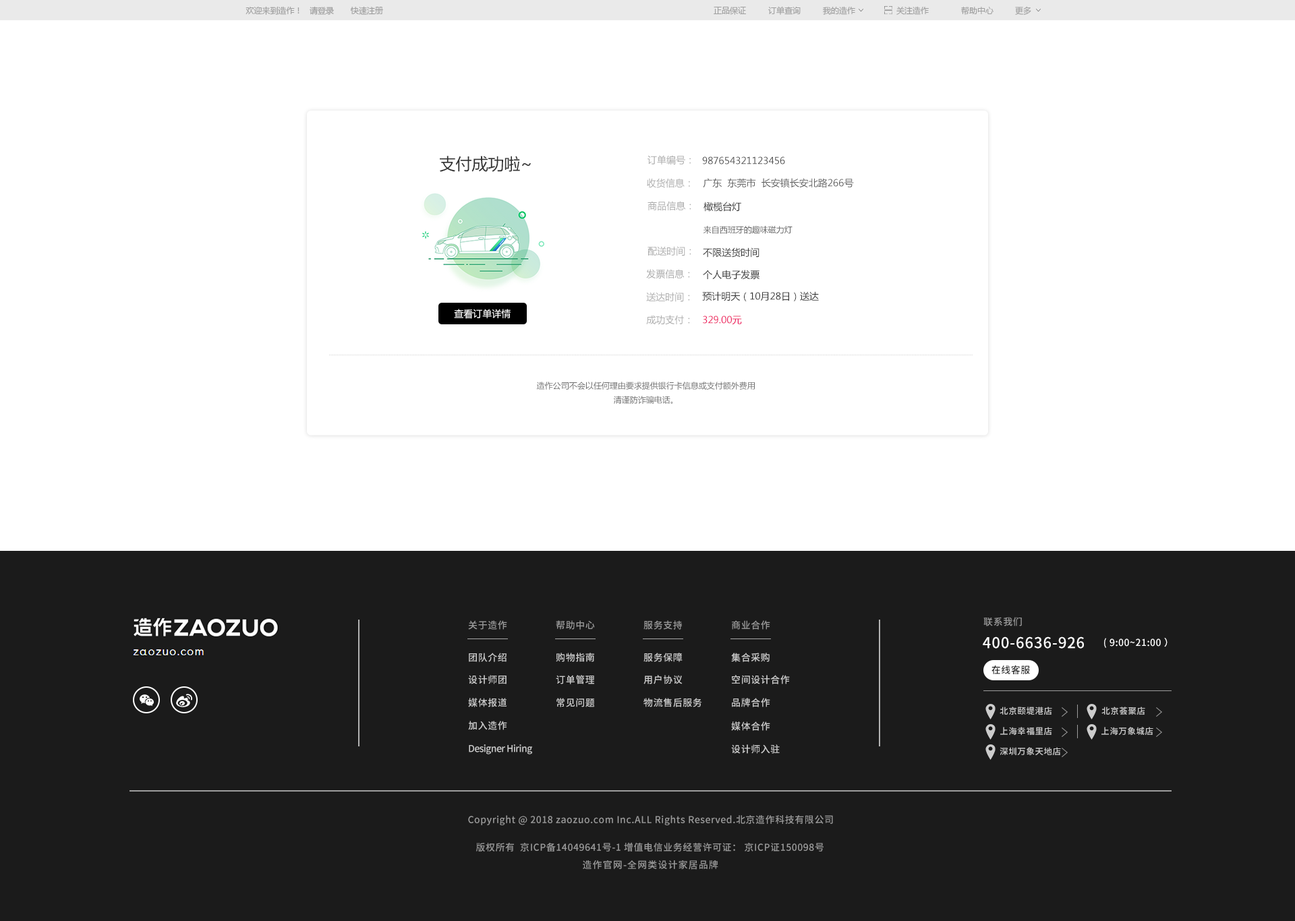
<style>
.page{position:relative;width:1295px;height:921px;background:#ffffff}
.page>*{position:absolute;margin:0}
.t1{font:8.1px "MicrosoftYaHei";color:#9f9f9f;text-transform:uppercase}
.t2{font:16.2px "MicrosoftYaHei";color:#333333}
.t3{font:9.4px "MicrosoftYaHei";color:#adadad}
.t4{font:9.4px "MicrosoftYaHei";color:#535353}
.t5{font:9.4px "MicrosoftYaHei";color:#616161}
.t6{font:9.4px "MicrosoftYaHei";color:#343434}
.t7{font:8.1px "MicrosoftYaHei";color:#616161;text-transform:uppercase}
.t8{font:9.4px "MicrosoftYaHei";color:#ffffff}
.t9{font:9.4px "MicrosoftYaHei";color:#ed145b}
.t10{font:8.1px "MicrosoftYaHei";color:#6e6e6e}
.t11{font:9.4px "SourceHanSansCN-Medium";letter-spacing:0.04em;color:#999999}
.t12{font:14.9px "SourceHanSansCN-Medium";letter-spacing:0.04em;color:#ffffff}
.t13{font:9.4px "SourceHanSansCN-Medium";letter-spacing:0.04em;color:#ffffff}
.t14{font:9.4px "SourceHanSansCN-Medium";letter-spacing:0.04em;color:#cccccc}
.t15{font:9.4px "SourceHanSansCN-Medium";letter-spacing:0.04em;color:#1b1b1b}
.t16{font:8.4px "SourceHanSansCN-Medium";letter-spacing:0.04em;color:#cccccc}
.t17{font:9.4px "SourceHanSansCN-Medium";letter-spacing:-0.04em;color:#cccccc}
.t18{font:9.4px "SourceHanSansCN-Medium";letter-spacing:0.08em;color:#999999}
</style>
<div class="page">
<p class="t1" style="left:245px;top:6px;width:138px;height:9px">欢迎来到造作！   请登录       快速注册</p>
<p class="t1" style="left:713px;top:7px;width:33px;height:8px">正品保证</p>
<p class="t1" style="left:768px;top:6px;width:32px;height:9px">订单查询</p>
<p class="t1" style="left:823px;top:6px;width:32px;height:9px">我的造作</p>
<p class="t1" style="left:896px;top:6px;width:32px;height:9px">关注造作</p>
<p class="t1" style="left:961px;top:6px;width:32px;height:9px">帮助中心</p>
<p class="t1" style="left:1015px;top:6px;width:16px;height:9px">更多</p>
<p class="t2" style="left:440px;top:156px;width:91px;height:16px">支付成功啦~</p>
<p class="t3" style="left:647px;top:155px;width:43px;height:10px">订单编号：</p>
<p class="t4" style="left:702px;top:156px;width:83px;height:9px">987654321123456</p>
<p class="t3" style="left:647px;top:178px;width:43px;height:10px">收货信息：</p>
<p class="t5" style="left:703px;top:178px;width:151px;height:10px">广东  东莞市  长安镇长安北路266号</p>
<p class="t3" style="left:647px;top:201px;width:44px;height:10px">商品信息：</p>
<p class="t6" style="left:703px;top:202px;width:38px;height:10px">橄榄台灯</p>
<p class="t7" style="left:703px;top:226px;width:89px;height:8px">来自西班牙的趣味磁力灯</p>
<p class="t3" style="left:647px;top:246px;width:44px;height:10px">配送时间：</p>
<p class="t6" style="left:703px;top:247px;width:56px;height:11px">不限送货时间</p>
<p class="t3" style="left:646px;top:269px;width:44px;height:9px">发票信息：</p>
<p class="t6" style="left:703px;top:270px;width:56px;height:9px">个人电子发票</p>
<p class="t3" style="left:646px;top:292px;width:44px;height:10px">送达时间：</p>
<p class="t6" style="left:702px;top:291px;width:117px;height:10px">预计明天（10月28日）送达</p>
<p class="t8" style="left:454px;top:309px;width:56px;height:10px">查看订单详情</p>
<p class="t3" style="left:646px;top:315px;width:44px;height:10px">成功支付：</p>
<p class="t9" style="left:703px;top:316px;width:39px;height:9px">329.00元</p>
<p class="t10" style="left:536px;top:382px;width:219px;height:22px;text-align:center">造作公司不会以任何理由要求提供银行卡信息或支付额外费用<br>清谨防诈骗电话。</p>
<p class="t11" style="left:983px;top:617px;width:39px;height:9px">联系我们</p>
<p class="t11" style="left:468px;top:620px;width:39px;height:10px">关于造作</p>
<p class="t11" style="left:556px;top:620px;width:39px;height:10px">帮助中心</p>
<p class="t11" style="left:643px;top:620px;width:39px;height:10px">服务支持</p>
<p class="t11" style="left:732px;top:620px;width:38px;height:10px">商业合作</p>
<p class="t12" style="left:982px;top:637px;width:102px;height:12px">400-6636-926</p>
<p class="t13" style="left:1104px;top:638px;width:63px;height:10px">( 9:00~21:00 ）</p>
<p class="t14" style="left:469px;top:653px;width:37px;height:9px">团队介绍</p>
<p class="t14" style="left:556px;top:653px;width:38px;height:9px">购物指南</p>
<p class="t14" style="left:643px;top:653px;width:39px;height:9px">服务保障</p>
<p class="t14" style="left:731px;top:653px;width:38px;height:9px">集合采购</p>
<p class="t15" style="left:991px;top:666px;width:39px;height:8px">在线客服</p>
<p class="t14" style="left:468px;top:675px;width:38px;height:9px">设计师团</p>
<p class="t14" style="left:556px;top:675px;width:38px;height:9px">订单管理</p>
<p class="t14" style="left:643px;top:675px;width:39px;height:9px">用户协议</p>
<p class="t14" style="left:732px;top:675px;width:58px;height:9px">空间设计合作</p>
<p class="t14" style="left:468px;top:698px;width:39px;height:9px">媒体报道</p>
<p class="t14" style="left:556px;top:698px;width:39px;height:9px">常见问题</p>
<p class="t14" style="left:643px;top:698px;width:59px;height:9px">物流售后服务</p>
<p class="t14" style="left:732px;top:698px;width:38px;height:9px">品牌合作</p>
<p class="t16" style="left:999px;top:707px;width:53px;height:8px">北京颐堤港店</p>
<p class="t16" style="left:1101px;top:707px;width:44px;height:8px">北京荟聚店</p>
<p class="t14" style="left:468px;top:721px;width:39px;height:9px">加入造作</p>
<p class="t14" style="left:731px;top:721px;width:39px;height:10px">媒体合作</p>
<p class="t16" style="left:1000px;top:727px;width:52px;height:8px">上海幸福里店</p>
<p class="t16" style="left:1101px;top:727px;width:52px;height:8px">上海万象城店</p>
<p class="t17" style="left:469px;top:744px;width:63px;height:11px">Designer Hiring</p>
<p class="t14" style="left:731px;top:744px;width:48px;height:10px">设计师入驻</p>
<p class="t16" style="left:999px;top:747px;width:62px;height:8px">深圳万象天地店</p>
<p class="t11" style="left:468px;top:815px;width:365px;height:10px">Copyright @ 2018 zaozuo.com Inc.ALL Rights Reserved.北京造作科技有限公司</p>
<p class="t11" style="left:476px;top:842px;width:347px;height:10px">版权所有  京ICP备14049641号-1 增值电信业务经营许可证： 京ICP证150098号</p>
<p class="t18" style="left:583px;top:860px;width:135px;height:10px">造作官网-全网类设计家居品牌</p>
</div>
